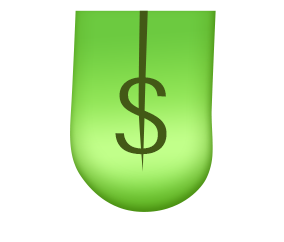
<style>
.page{position:relative;width:284px;height:242px;background:#ffffff}
.page>*{position:absolute;margin:0}
.t1{font:110px "AcuminConcept-CondensedLight";letter-spacing:0.025em;color:#435916;text-transform:uppercase;scale:1.3 1}
</style>
<div class="page">
<p class="t1" style="left:115px;top:77px;width:52px;height:78px;rotate:1deg">S</p>
</div>
